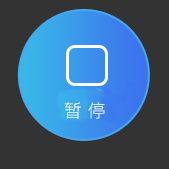
<style>
.page{position:relative;width:169px;height:169px;background:#333333}
.page>*{position:absolute;margin:0}
.t1{font:18px "PingFang-SC-Regular";color:#ffffff}
</style>
<div class="page">
<p class="t1" style="left:64px;top:102px;width:41px;height:17px">暂 停</p>
</div>
